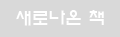
<style>
.page{position:relative;width:120px;height:37px;background:#d9d9d9}
.page>*{position:absolute;margin:0}
.t1{font:16.7px "ExpoM-HM";color:#ffffff}
</style>
<div class="page">
<p class="t1" style="left:16px;top:10px;width:88px;height:16px">새로나온 책</p>
</div>
